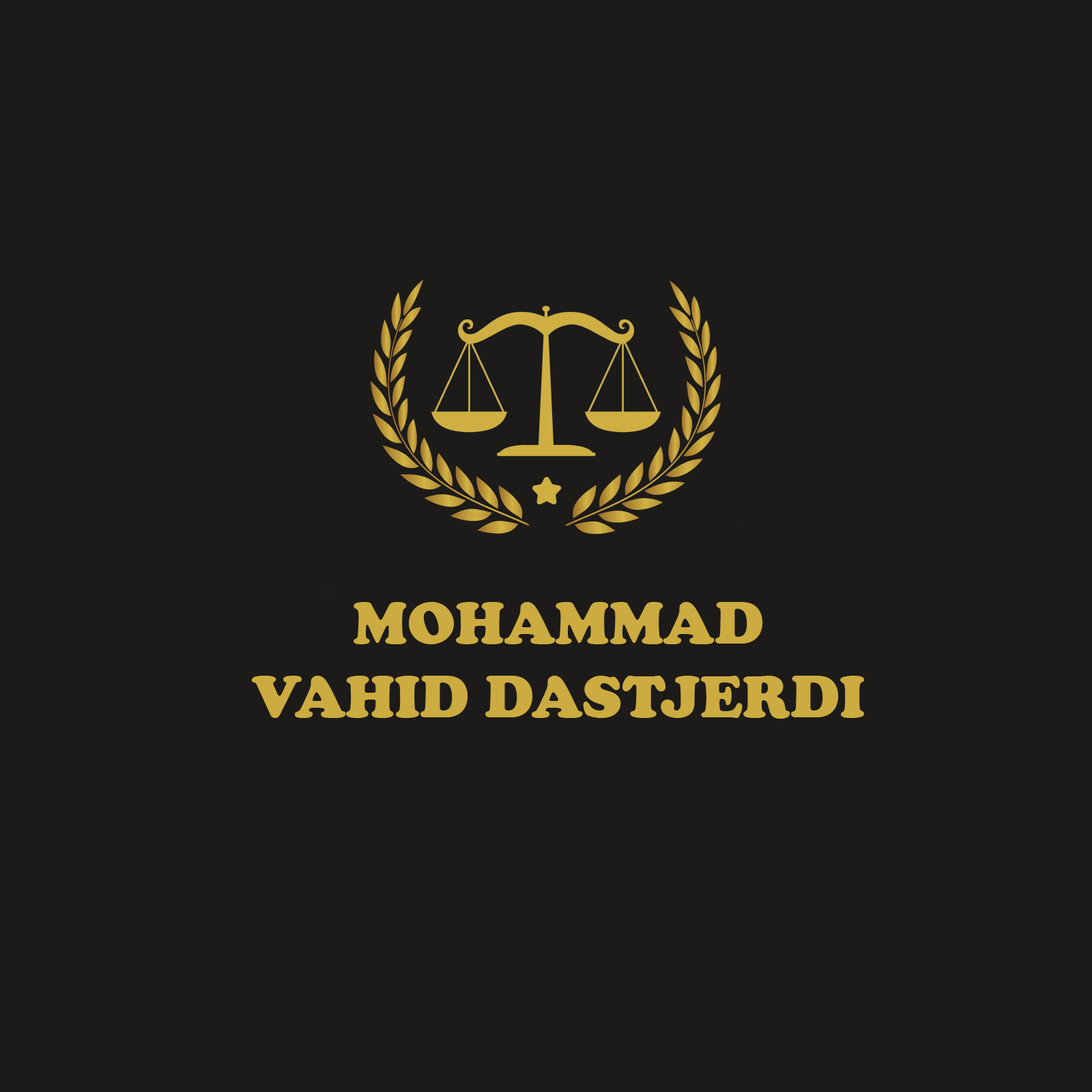
<style>
.page{position:relative;width:1092px;height:1092px;background:#1c1b19}
.page>*{position:absolute;margin:0}
.t1{font:61.4px "CooperBlack";color:#ccab40}
</style>
<div class="page">
<p class="t1" style="left:252px;top:602px;width:612px;height:117px;text-align:center">MOHAMMAD<br>VAHID DASTJERDI</p>
</div>
